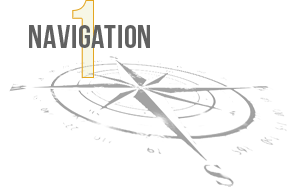
<style>
.page{position:relative;width:300px;height:187px;background:#ffffff}
.page>*{position:absolute;margin:0}
.t1{font:33px "BebasNeue";letter-spacing:0.022em;color:#616161}
</style>
<div class="page">
<p class="t1" style="left:29px;top:25px;width:121px;height:23px">NAVIGATION</p>
</div>
